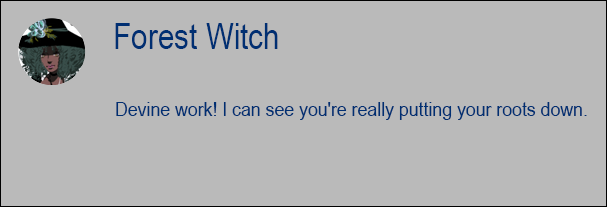
<style>
.page{position:relative;width:607px;height:207px;background:#bababa}
.page>*{position:absolute;margin:0}
.t1{font:36.3px "ArialNarrow";color:#002f72}
.t2{font:20.5px "ArialNarrow";color:#002f72;scale:1.05 1}
</style>
<div class="page">
<p class="t1" style="left:115px;top:23px;width:163px;height:26px">Forest Witch</p>
<p class="t2" style="left:116px;top:102px;width:471px;height:18px">Devine work! I can see you're really putting your roots down.</p>
</div>
